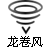
<style>
.page{position:relative;width:50px;height:48px;background:#ffffff}
.page>*{position:absolute;margin:0}
.t1{font:12px "OPPOSans-R";color:#000000}
</style>
<div class="page">
<p class="t1" style="left:7px;top:36px;width:36px;height:11px">龙卷风</p>
</div>
